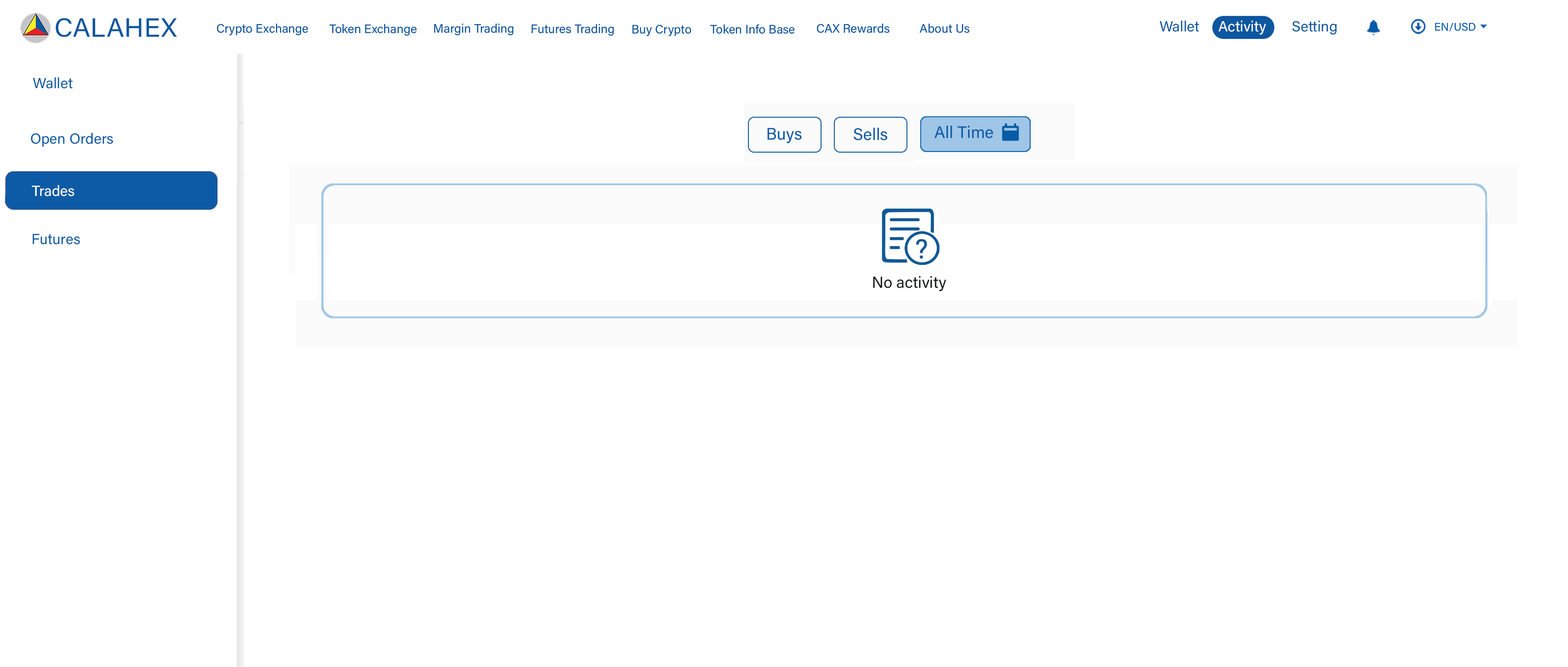
<style>
.page{position:relative;width:1568px;height:667px;background:#ffffff}
.page>*{position:absolute;margin:0}
.t1{font:26.4px "AcuminConcept-Regular";color:#0d57a0;font-style:italic}
.t2{font:12.2px "AcuminConcept-Regular";color:#0d57a0;font-style:italic}
.t3{font:11px "AcuminConcept-Regular";color:#055aaa;font-style:italic}
.t4{font:14.7px "AcuminConcept-Regular";color:#0d5ba6;font-style:italic}
.t5{font:16.7px "AcuminConcept-Regular";color:#0d5ba6;font-style:italic}
.t6{font:14.7px "AcuminConcept-Regular";color:#ffffff;font-style:italic}
.t7{font:15.9px "AcuminConcept-Regular";color:#191b1b;font-style:italic}
</style>
<div class="page">
<p class="t1" style="left:56px;top:18px;width:121px;height:19px">CALAHEX</p>
<p class="t2" style="left:217px;top:23px;width:91px;height:13px">Crypto Exchange</p>
<p class="t2" style="left:329px;top:24px;width:88px;height:12px">Token Exchange</p>
<p class="t2" style="left:434px;top:23px;width:79px;height:13px">Margin Trading</p>
<p class="t2" style="left:531px;top:24px;width:83px;height:12px">Futures Trading</p>
<p class="t2" style="left:632px;top:24px;width:59px;height:12px">Buy Crypto</p>
<p class="t2" style="left:710px;top:24px;width:85px;height:10px">Token Info Base</p>
<p class="t2" style="left:817px;top:23px;width:73px;height:10px">CAX Rewards</p>
<p class="t2" style="left:919px;top:23px;width:51px;height:10px">About Us</p>
<p class="t3" style="left:1435px;top:22px;width:41px;height:9px">EN/USD</p>
<p class="t4" style="left:33px;top:77px;width:40px;height:12px">Wallet</p>
<p class="t5" style="left:934px;top:125px;width:59px;height:13px">All Time</p>
<p class="t4" style="left:31px;top:133px;width:82px;height:14px">Open Orders</p>
<p class="t5" style="left:767px;top:128px;width:35px;height:15px">Buys</p>
<p class="t5" style="left:853px;top:127px;width:34px;height:13px">Sells</p>
<p class="t6" style="left:32px;top:185px;width:42px;height:11px">Trades</p>
<p class="t4" style="left:33px;top:234px;width:47px;height:10px">Futures</p>
<p class="t7" style="left:873px;top:276px;width:73px;height:15px">No activity</p>
</div>
